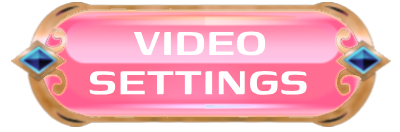
<style>
.page{position:relative;width:400px;height:132px;background:#ffffff}
.page>*{position:absolute;margin:0}
.t1{font:50px "Genos-SemiBold";color:#ffffff}
</style>
<div class="page">
<p class="t1" style="left:133px;top:31px;width:133px;height:25px">VIDEO</p>
<p class="t1" style="left:89px;top:71px;width:218px;height:24px">SETTINGS</p>
</div>
